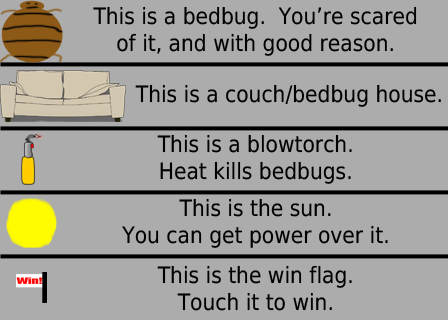
<style>
.page{position:relative;width:448px;height:320px;background:#acacac}
.page>*{position:absolute;margin:0}
.t1{font:22.5px "DejaVuSansCondensed";color:#000000}
</style>
<div class="page">
<p class="t1" style="left:93px;top:6px;width:324px;height:50px;text-align:center">This is a bedbug.  You’re scared<br>of it, and with good reason.</p>
<p class="t1" style="left:135px;top:84px;width:306px;height:23px">This is a couch/bedbug house.</p>
<p class="t1" style="left:157px;top:134px;width:195px;height:50px;text-align:center">This is a blowtorch.<br>Heat kills bedbugs.</p>
<p class="t1" style="left:122px;top:198px;width:266px;height:50px;text-align:center">This is the sun.<br>You can get power over it.</p>
<p class="t1" style="left:157px;top:265px;width:195px;height:46px;text-align:center">This is the win flag.<br>Touch it to win.</p>
</div>
